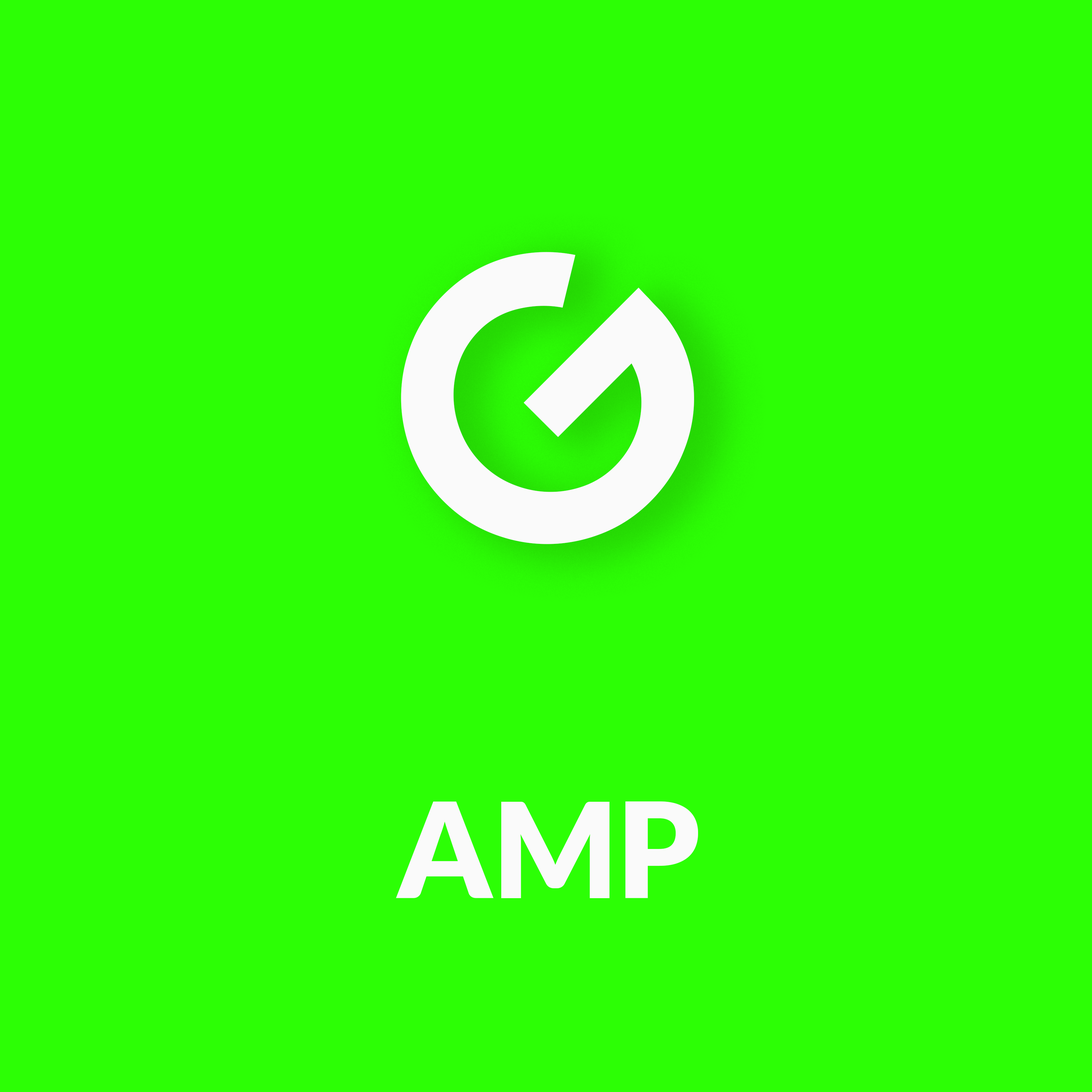
<style>
.page{position:relative;width:1092px;height:1092px;background:#2cff05}
.page>*{position:absolute;margin:0}
.t1{font:385.2px "Geometos";color:#fafafa}
.t2{font:132.1px "Lato-Black";color:#fafafa}
</style>
<div class="page">
<p class="t1" style="left:401px;top:252px;width:293px;height:292px;rotate:-45deg">G</p>
<p class="t2" style="left:396px;top:801px;width:302px;height:97px">AMP</p>
</div>
